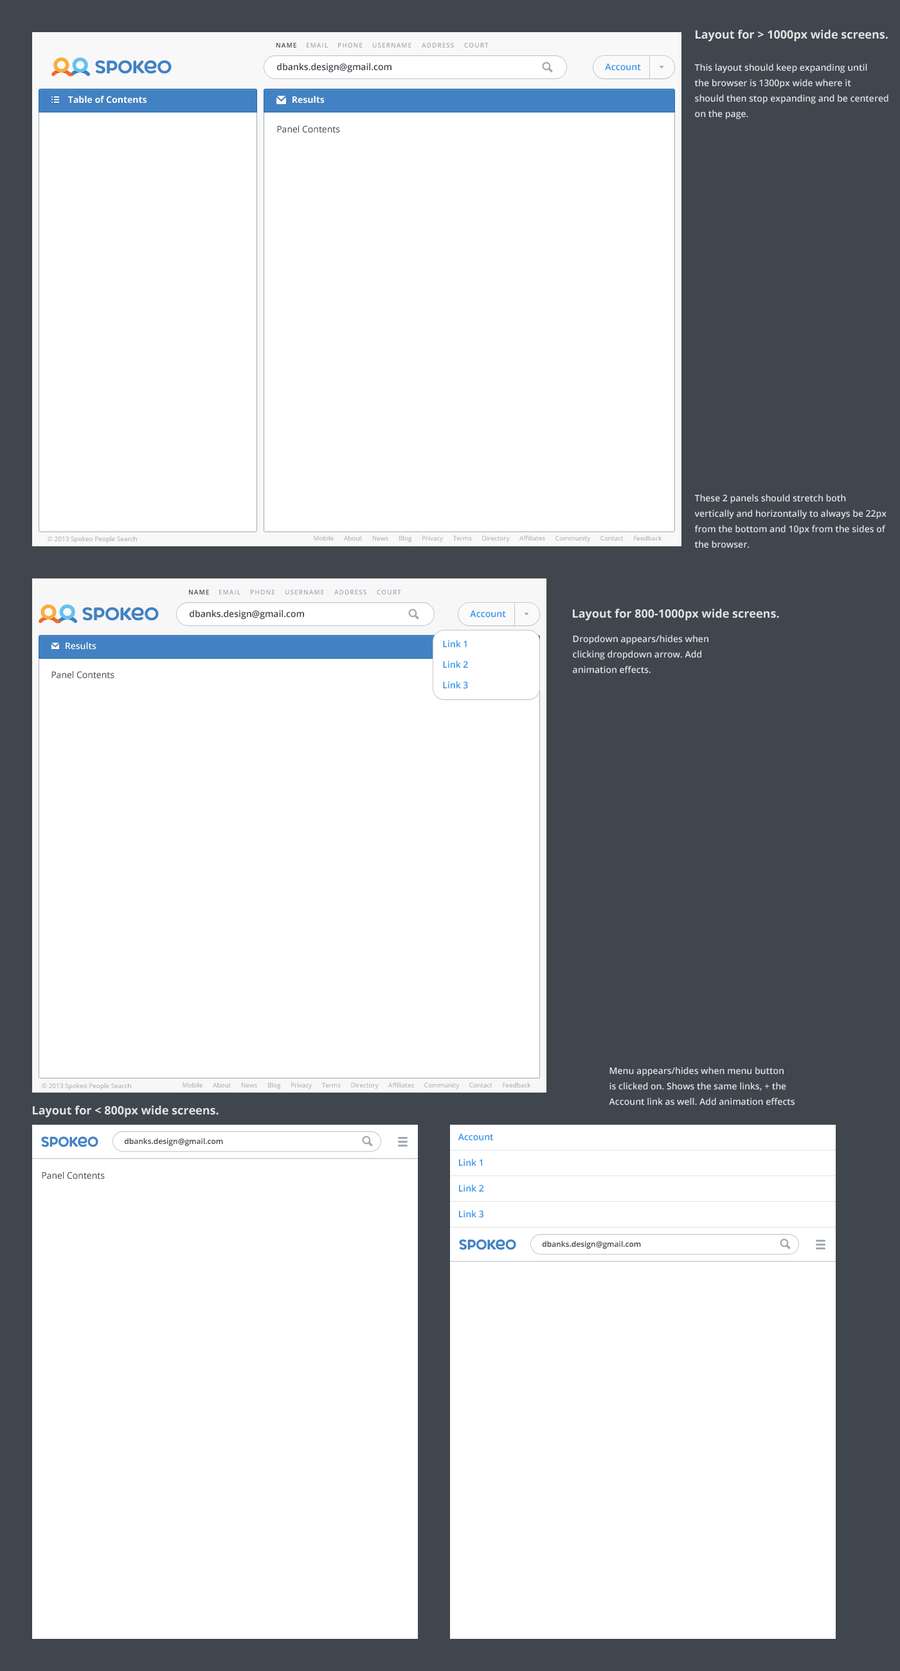
<style>
.page{position:relative;width:900px;height:1671px;background:#ffffff}
.page>*{position:absolute;margin:0}
.t1{font:11.6px "OpenSans-Bold";color:#e1e3e5}
.t2{font:6.4px "OpenSans-Semibold";letter-spacing:0.1em;color:#40464d;text-transform:uppercase}
.t3{font:6.4px "OpenSans-Semibold";letter-spacing:0.1em;color:#a1aab3;text-transform:uppercase}
.t4{font:9px "OpenSans-Semibold";color:#40464d}
.t5{font:9px "OpenSans-Semibold";letter-spacing:0.005em;color:#3c93ea}
.t6{font:9px/15.4px "OpenSans-Semibold";color:#e1e3e5}
.t7{font:9px "OpenSans-Bold";color:#ffffff}
.t8{font:9px "OpenSans";color:#40464d}
.t9{font:6.4px "OpenSans";color:#a1aab3}
.t10{font:9px/20.6px "OpenSans-Semibold";color:#3c93ea}
.t11{font:9px "OpenSans-Semibold";color:#ffffff}
.t12{font:9px/25.7px "OpenSans-Semibold";color:#3c93ea}
.t13{font:7.7px "OpenSans-Semibold";color:#40464d}
</style>
<div class="page">
<p class="t1" style="left:696px;top:30px;width:192px;height:12px">Layout for &gt; 1000px wide screens.</p>
<p class="t2" style="left:276px;top:42px;width:20px;height:6px">name</p>
<p class="t3" style="left:307px;top:42px;width:21px;height:6px">email</p>
<p class="t3" style="left:338px;top:42px;width:25px;height:6px">phone</p>
<p class="t3" style="left:373px;top:42px;width:38px;height:6px">username</p>
<p class="t3" style="left:422px;top:42px;width:32px;height:6px">Address</p>
<p class="t3" style="left:464px;top:42px;width:25px;height:6px">court</p>
<p class="t4" style="left:277px;top:63px;width:115px;height:10px">dbanks.design@gmail.com</p>
<p class="t5" style="left:605px;top:64px;width:36px;height:7px">Account</p>
<p class="t6" style="left:694px;top:64px;width:194px;height:56px">This layout should keep expanding until<br>the browser is 1300px wide where it <br>should then stop expanding and be centered<br>on the page.</p>
<p class="t7" style="left:68px;top:96px;width:79px;height:8px">Table of Contents</p>
<p class="t7" style="left:292px;top:96px;width:33px;height:8px">Results</p>
<p class="t8" style="left:277px;top:125px;width:63px;height:8px">Panel Contents</p>
<p class="t6" style="left:694px;top:494px;width:193px;height:54px">These 2 panels should stretch both vertically and horizontally to always be 22px from the bottom and 10px from the sides of the browser.</p>
<p class="t9" style="left:48px;top:536px;width:89px;height:7px">© 2013 Spokeo People Search</p>
<p class="t9" style="left:314px;top:536px;width:348px;height:7px">Mobile      About      News      Blog      Privacy      Terms      Directory      Affiliates      Community      Contact      Feedback</p>
<p class="t2" style="left:189px;top:590px;width:20px;height:5px">name</p>
<p class="t3" style="left:219px;top:590px;width:21px;height:5px">email</p>
<p class="t3" style="left:251px;top:590px;width:24px;height:5px">phone</p>
<p class="t3" style="left:285px;top:590px;width:39px;height:5px">username</p>
<p class="t3" style="left:334px;top:590px;width:32px;height:5px">Address</p>
<p class="t3" style="left:377px;top:590px;width:24px;height:5px">court</p>
<p class="t4" style="left:190px;top:610px;width:114px;height:10px">dbanks.design@gmail.com</p>
<p class="t5" style="left:470px;top:611px;width:36px;height:7px">Account</p>
<p class="t1" style="left:573px;top:609px;width:206px;height:12px">Layout for 800-1000px wide screens.</p>
<p class="t10" style="left:443px;top:640px;width:25px;height:49px">Link 1<br>Link 2<br>Link 3</p>
<p class="t6" style="left:573px;top:635px;width:135px;height:39px">Dropdown appears/hides when<br>clicking dropdown arrow. Add<br>animation effects.</p>
<p class="t11" style="left:66px;top:642px;width:30px;height:8px">Results</p>
<p class="t8" style="left:51px;top:671px;width:63px;height:8px">Panel Contents</p>
<p class="t6" style="left:609px;top:1067px;width:186px;height:39px">Menu appears/hides when menu button<br>is clicked on. Shows the same links, + the<br>Account link as well. Add animation effects</p>
<p class="t9" style="left:42px;top:1083px;width:89px;height:7px">© 2013 Spokeo People Search</p>
<p class="t9" style="left:183px;top:1083px;width:348px;height:7px">Mobile      About      News      Blog      Privacy      Terms      Directory      Affiliates      Community      Contact      Feedback</p>
<p class="t1" style="left:33px;top:1106px;width:186px;height:12px">Layout for &lt; 800px wide screens.</p>
<p class="t12" style="left:458px;top:1134px;width:36px;height:84px">Account<br>Link 1<br>Link 2<br>Link 3</p>
<p class="t13" style="left:124px;top:1138px;width:99px;height:8px">dbanks.design@gmail.com</p>
<p class="t8" style="left:42px;top:1172px;width:63px;height:8px">Panel Contents</p>
<p class="t13" style="left:542px;top:1241px;width:99px;height:8px">dbanks.design@gmail.com</p>
</div>
